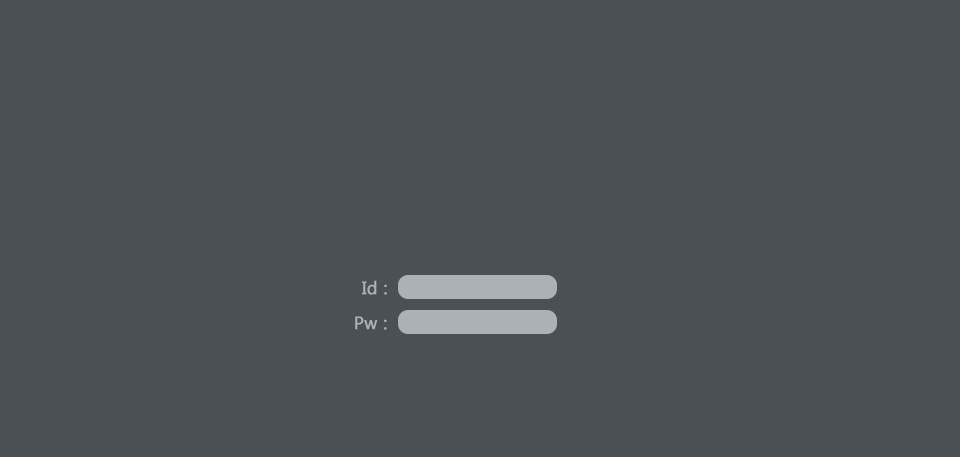
<style>
.page{position:relative;width:960px;height:457px;background:#4a5054}
.page>*{position:absolute;margin:0}
.t1{font:18px "Ebrima";color:#abb1b5;font-weight:bold}
</style>
<div class="page">
<p class="t1" style="left:362px;top:280px;width:25px;height:15px">Id :</p>
<p class="t1" style="left:355px;top:316px;width:32px;height:14px">Pw :</p>
</div>
